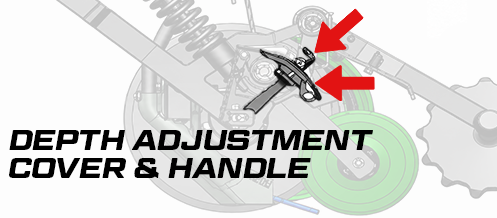
<style>
.page{position:relative;width:497px;height:218px;background:#fdfdfd}
.page>*{position:absolute;margin:0}
.t1{font:28.3px/28px "GeomGraphic-BoldItalic";color:#000000;text-transform:uppercase}
</style>
<div class="page">
<p class="t1" style="left:9px;top:130px;width:364px;height:48px">depth ADJUSTMENT<br>cover &amp; handle</p>
</div>
